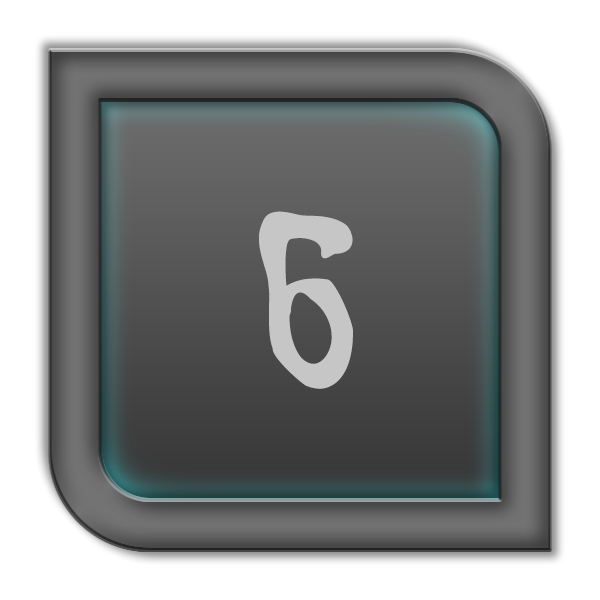
<style>
.page{position:relative;width:600px;height:600px;background:#ffffff}
.page>*{position:absolute;margin:0}
.t1{font:300px "WILD2GhixmNC";color:#c6c6c6;scale:0.83 1}
</style>
<div class="page">
<p class="t1" style="left:259px;top:211px;width:94px;height:178px">6</p>
</div>
